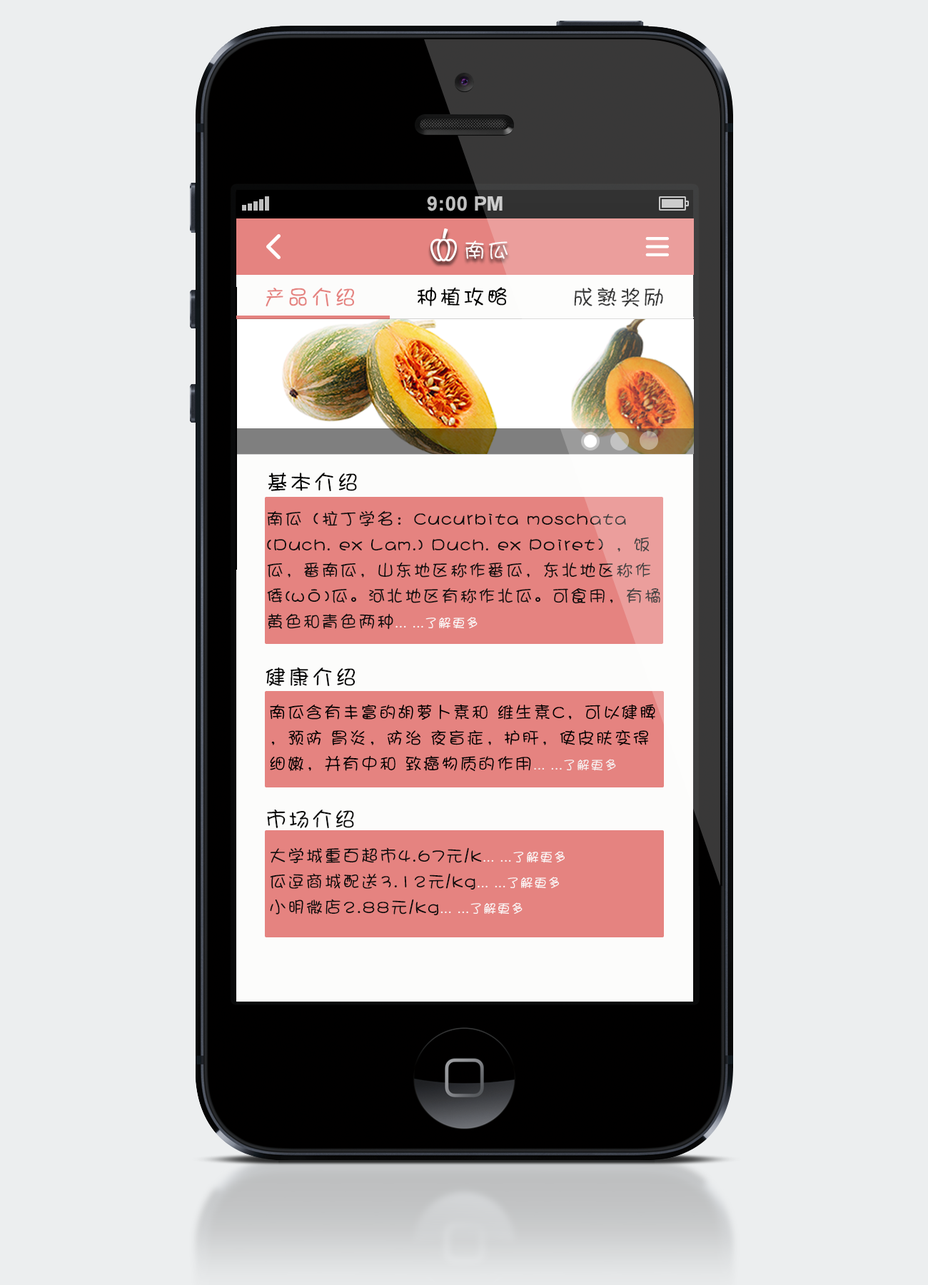
<style>
.page{position:relative;width:928px;height:1285px;background:#eceeef}
.page>*{position:absolute;margin:0}
.t1{font:21.4px "DFPShaoNvW5";letter-spacing:0.1em;color:#faf5f5}
.t2{font:21.4px "DFPShaoNvW5";letter-spacing:0.1em;color:#e58380}
.t3{font:21.4px "DFPShaoNvW5";letter-spacing:0.1em;color:#000000}
.t4{font:21.4px "DFPShaoNvW5";letter-spacing:0.1em;color:#383838}
.t5{font:17.1px/25.7px "DFPShaoNvW5";letter-spacing:0.075em;color:#0e0d0d}
.t6{font:12.8px/25.7px "DFPShaoNvW5";letter-spacing:0.075em;color:#fbfbfb}
.t7{font:17.1px/25.7px "DFPShaoNvW5";letter-spacing:0.075em;color:#000000}
.t8{font:12.8px/25.7px "DFPShaoNvW5";letter-spacing:0.075em;color:#f6f2f2}
.t9{font:21.4px "DFPShaoNvW5";letter-spacing:0.075em;color:#0b0b0b}
.t10{font:17.1px/25.7px "DFPShaoNvW5";letter-spacing:0.075em;color:#0b0b0b}
.t11{font:12.8px/25.7px "DFPShaoNvW5";letter-spacing:0.075em;color:#fbf9f9}
</style>
<div class="page">
<p class="t1" style="left:465px;top:241px;width:43px;height:18px">南瓜</p>
<p class="t2" style="left:266px;top:288px;width:88px;height:19px">产品介绍</p>
<p class="t3" style="left:417px;top:287px;width:90px;height:19px">种植攻略</p>
<p class="t4" style="left:574px;top:288px;width:89px;height:19px">成熟奖励</p>
<p class="t3" style="left:268px;top:473px;width:89px;height:18px">基本介绍</p>
<p class="t5" style="left:267px;top:510px;width:393px;height:120px">南瓜（拉丁学名：Cucurbita moschata (Duch. ex Lam.) Duch. ex Poiret），饭瓜，番南瓜，山东地区称作番瓜，东北地区称作倭(wō)瓜。河北地区有称作北瓜。可食用，有橘黄色和青色两种<span class="t6">... ...了解更多</span></p>
<p class="t3" style="left:266px;top:667px;width:89px;height:19px">健康介绍</p>
<p class="t7" style="left:270px;top:704px;width:385px;height:68px">南瓜含有丰富的胡萝卜素和 维生素C，可以健脾，预防 胃炎，防治 夜盲症，护肝，使皮肤变得细嫩，并有中和 致癌物质的作用<span class="t8">... ...了解更多</span></p>
<p class="t9" style="left:267px;top:810px;width:87px;height:18px">市场介绍</p>
<p class="t10" style="left:270px;top:847px;width:295px;height:68px">大学城重百超市4.67元/k<span class="t11">... ...了解更多<br></span>瓜逗商城配送3.12元/kg<span class="t11">... ...了解更多<br></span>小明微店2.88元/kg<span class="t11">... ...了解更多</span></p>
</div>
